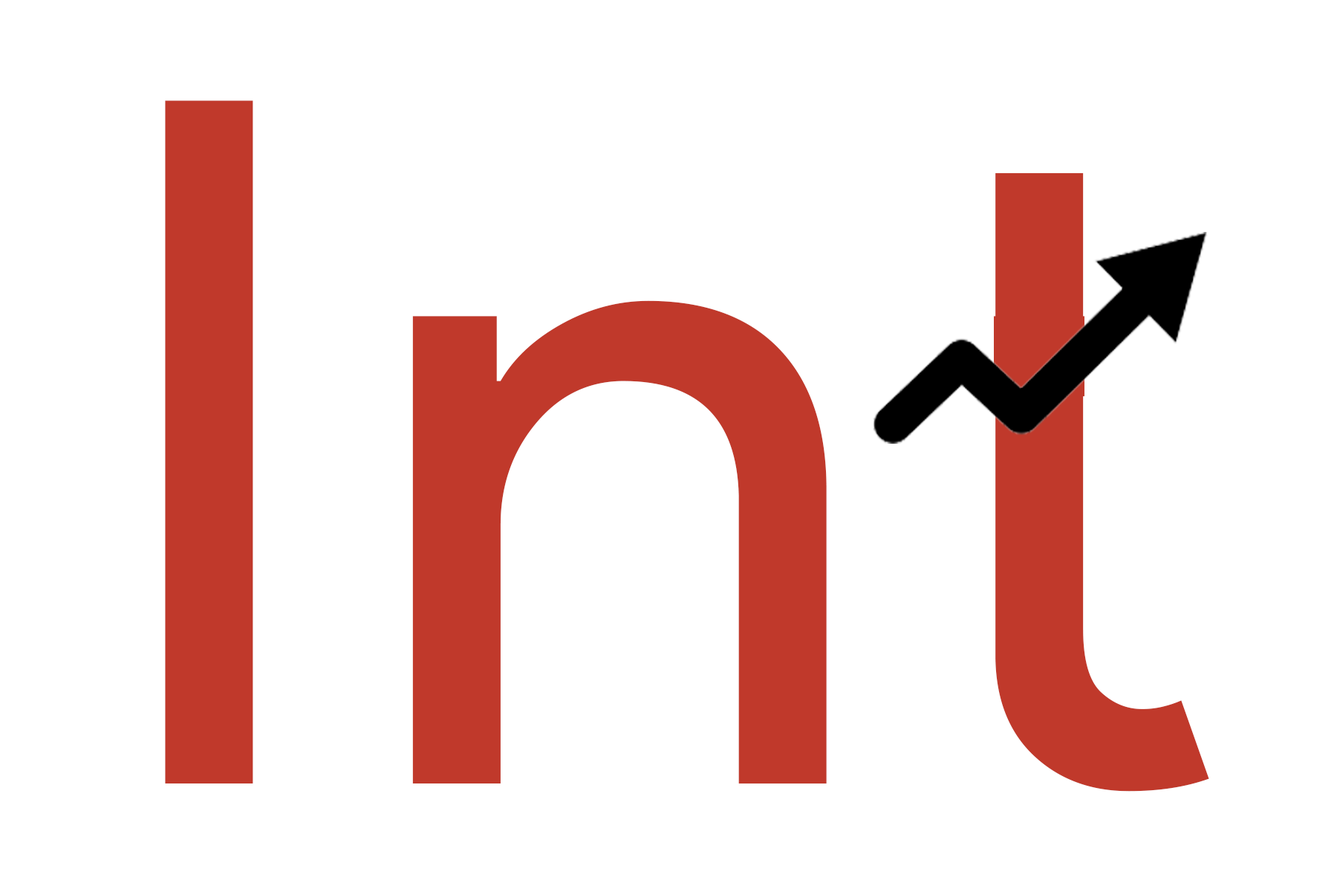
<style>
.page{position:relative;width:1337px;height:892px;background:#ffffff}
.page>*{position:absolute;margin:0}
.t1{font:953.5px "ProductSans-Regular";letter-spacing:0.04em;color:#c0392b}
</style>
<div class="page">
<p class="t1" style="left:165px;top:100px;width:1045px;height:691px">Int</p>
</div>
